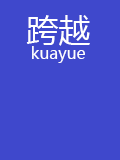
<style>
.page{position:relative;width:120px;height:160px;background:#3f48cc}
.page>*{position:absolute;margin:0}
.t1{font:32px "MicrosoftYaHeiUI";color:#ffffff}
.t2{font:16px "MicrosoftYaHeiUI";color:#ffffff}
</style>
<div class="page">
<p class="t1" style="left:26px;top:15px;width:64px;height:31px">跨越</p>
<p class="t2" style="left:32px;top:46px;width:53px;height:17px">kuayue</p>
</div>
